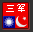
<style>
.page{position:relative;width:33px;height:32px;background:#f20000}
.page>*{position:absolute;margin:0}
.t1{font:10.4px "SimSun";color:#ffffff}
</style>
<div class="page">
<p class="t1" style="left:6px;top:4px;width:19px;height:8px">三军</p>
</div>
